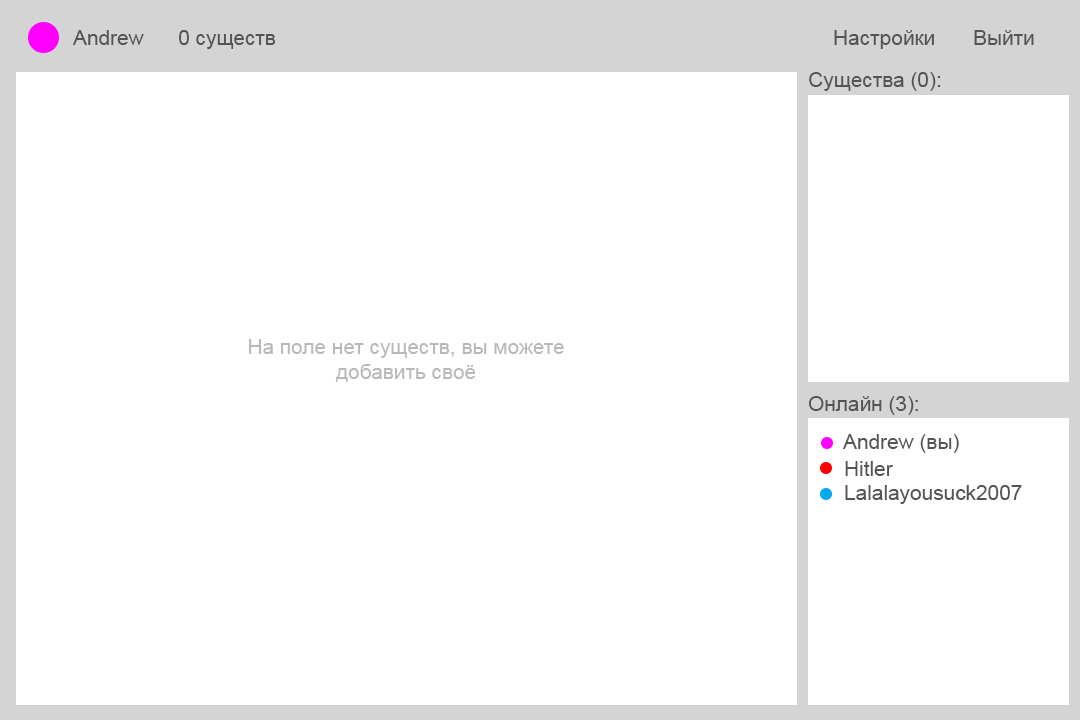
<style>
.page{position:relative;width:1080px;height:720px;background:#ffffff}
.page>*{position:absolute;margin:0}
.t1{font:20.8px "ArialMT";color:#545454}
.t2{font:20.8px "ArialMT";color:#b8b8b8}
</style>
<div class="page">
<p class="t1" style="left:73px;top:30px;width:71px;height:15px">Andrew</p>
<p class="t1" style="left:179px;top:30px;width:97px;height:19px">0 существ</p>
<p class="t1" style="left:834px;top:30px;width:100px;height:19px">Настройки</p>
<p class="t1" style="left:974px;top:30px;width:60px;height:15px">Выйти</p>
<p class="t1" style="left:809px;top:72px;width:132px;height:19px">Существа (0):</p>
<p class="t2" style="left:249px;top:339px;width:315px;height:43px;text-align:center">На поле нет существ, вы можете<br>добавить своё</p>
<p class="t1" style="left:808px;top:396px;width:110px;height:19px">Онлайн (3):</p>
<p class="t1" style="left:843px;top:434px;width:116px;height:19px">Andrew (вы)</p>
<p class="t1" style="left:845px;top:461px;width:48px;height:15px">Hitler</p>
<p class="t1" style="left:845px;top:485px;width:177px;height:19px">Lalalayousuck2007</p>
</div>
